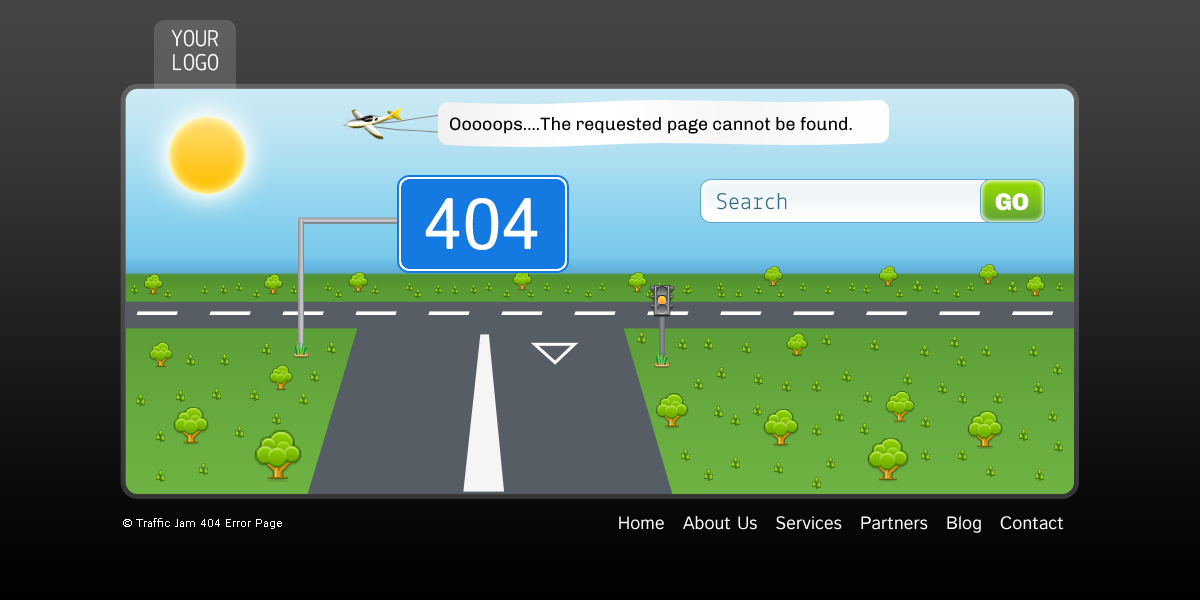
<style>
.page{position:relative;width:1200px;height:600px}
.page>*{position:absolute;margin:0}
.t1{font:24px/24px "Lekton-Regular";color:#ffffff}
.t2{font:18px "Chivo-Regular";color:#000000}
.t3{font:72px "IstokWeb-Regular";color:#ffffff}
.t4{font:24px "Lekton-Regular";color:#366e88}
.t5{font:24px "Chivo-Black";color:#ffffff}
.t6{font:12px "IstokWeb-Regular";color:#ffffff}
.t7{font:18px "IstokWeb-Regular";color:#ffffff}
</style>
<div class="page">
<p class="t1" style="left:171px;top:29px;width:48px;height:42px;text-align:center">YOUR<br>LOGO</p>
<p class="t2" style="left:450px;top:117px;width:402px;height:17px">Ooooops....The requested page cannot be found.</p>
<p class="t3" style="left:425px;top:198px;width:113px;height:52px">404</p>
<p class="t4" style="left:717px;top:193px;width:70px;height:17px">Search</p>
<p class="t5" style="left:995px;top:193px;width:34px;height:18px">GO</p>
<p class="t6" style="left:123px;top:518px;width:159px;height:11px">© Traffic Jam 404 Error Page</p>
<p class="t7" style="left:619px;top:516px;width:445px;height:17px">Home   About Us   Services   Partners   Blog   Contact</p>
</div>
